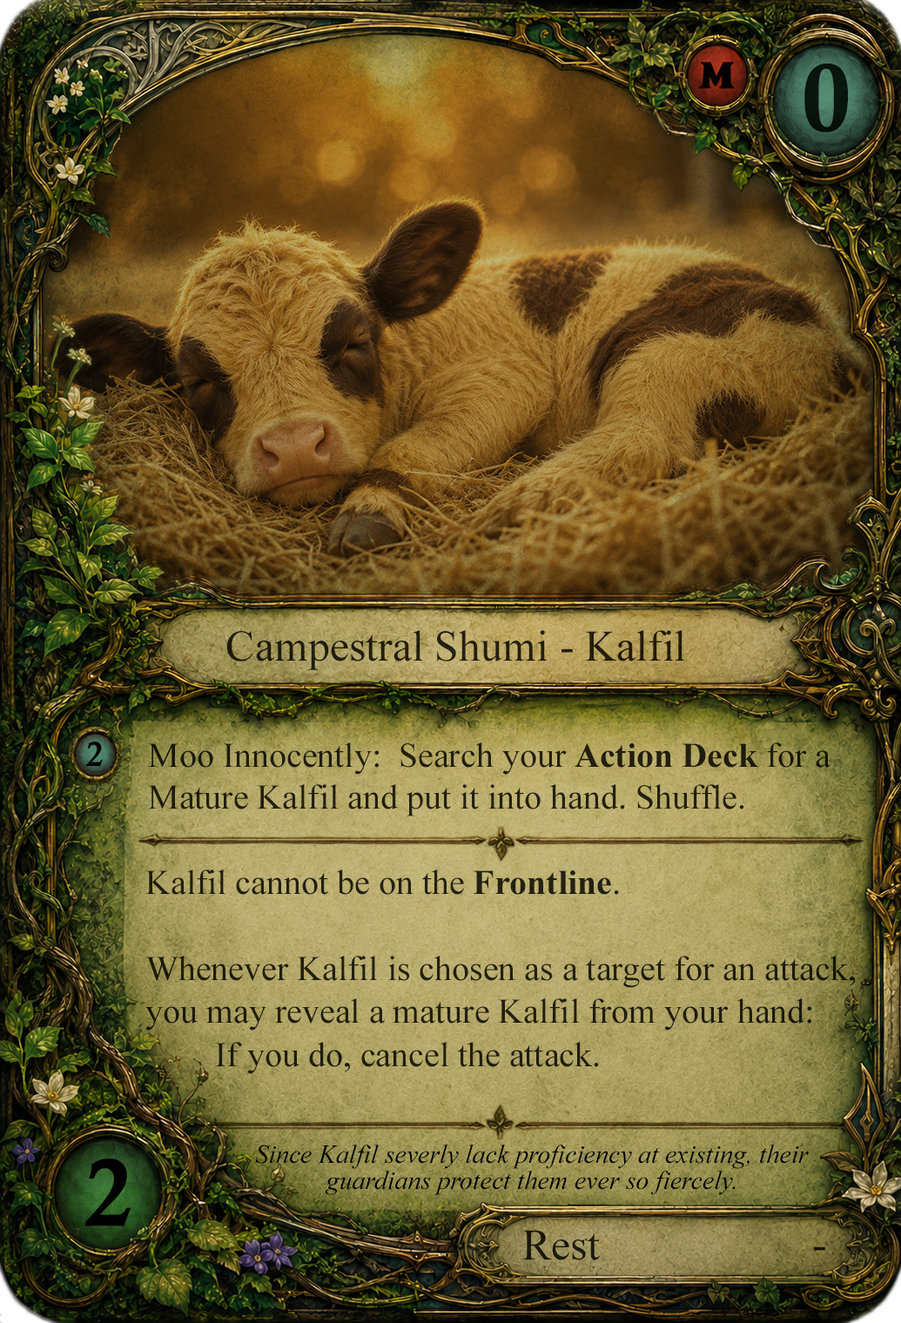
<style>
.page{position:relative;width:901px;height:1323px}
.page>*{position:absolute;margin:0}
.t1{font:95.8px "CalisMTBol";color:#000000}
.t2{font:43.5px "TimesNewRomanPSMT";color:#221d0d}
.t3{font:34.8px "CalisMTBol";color:#000000}
.t4{font:34.8px/41.8px "TimesNewRomanPSMT";color:#221f0e}
.t5{font:34.8px/41.8px "TimesNewRomanPS-BoldMT";color:#221f0e}
.t6{font:34.8px/41.8px "TimesNewRomanPSMT";color:#211e0f}
.t7{font:34.8px/41.8px "TimesNewRomanPS-BoldMT";color:#211e0f}
.t8{font:26.1px/26.1px "TimesNewRomanPS-ItalicMT";color:#000000}
.t9{font:43.5px "TimesNewRomanPSMT";color:#1c190d}
.t10{font:43.5px "TimesNewRomanPSMT";color:#000000}
</style>
<div class="page">
<p class="t1" style="left:804px;top:64px;width:44px;height:68px;opacity:0.9">0</p>
<p class="t2" style="left:226px;top:630px;width:459px;height:40px">Campestral Shumi - Kalfil</p>
<p class="t3" style="left:86px;top:742px;width:17px;height:25px">2</p>
<p class="t4" style="left:148px;top:743px;width:683px;height:74px">Moo Innocently:  Search your <span class="t5">Action Deck</span> for a<br>Mature Kalfil and put it into hand. Shuffle.</p>
<p class="t6" style="left:145px;top:870px;width:710px;height:204px">Kalfil cannot be on the <span class="t7">Frontline</span>.<br><br>Whenever Kalfil is chosen as a target for an attack,<br>you may reveal a mature Kalfil from your hand:<br>        If you do, cancel the attack.</p>
<p class="t8" style="left:255px;top:1145px;width:554px;height:50px;text-align:center">Since Kalfil severly lack proficiency at existing, their<br>guardians protect them ever so fiercely.</p>
<p class="t1" style="left:85px;top:1159px;width:46px;height:68px">2</p>
<p class="t9" style="left:522px;top:1230px;width:78px;height:31px">Rest</p>
<p class="t10" style="left:814px;top:1247px;width:11px;height:4px;opacity:0.9">-</p>
</div>
